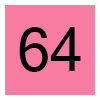
<style>
.page{position:relative;width:100px;height:100px;background:#f97ca2}
.page>*{position:absolute;margin:0}
.t1{font:60px "MicrosoftSansSerif";color:#000407}
</style>
<div class="page">
<p class="t1" style="left:19px;top:27px;width:62px;height:45px">64</p>
</div>
